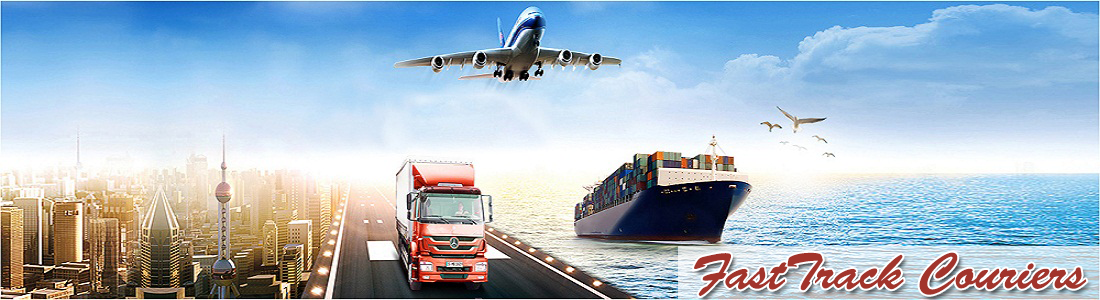
<style>
.page{position:relative;width:1100px;height:300px}
.page>*{position:absolute;margin:0}
.t1{font:50.7px "BrushScriptStd";color:#a2342b}
</style>
<div class="page">
<p class="t1" style="left:694px;top:252px;width:393px;height:44px">FastTrack Couriers</p>
</div>
